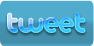
<style>
.page{position:relative;width:94px;height:46px;background:#50abcc}
.page>*{position:absolute;margin:0}
.t1{font:30px "PicoBlackAl";letter-spacing:-0.04em}
.t2{font:32px "zArista";letter-spacing:-0.04em}
</style>
<div class="page">
<p class="t1" style="left:7px;top:12px;width:79px;height:21px">tw<span class="t2">ee</span>t</p>
</div>
